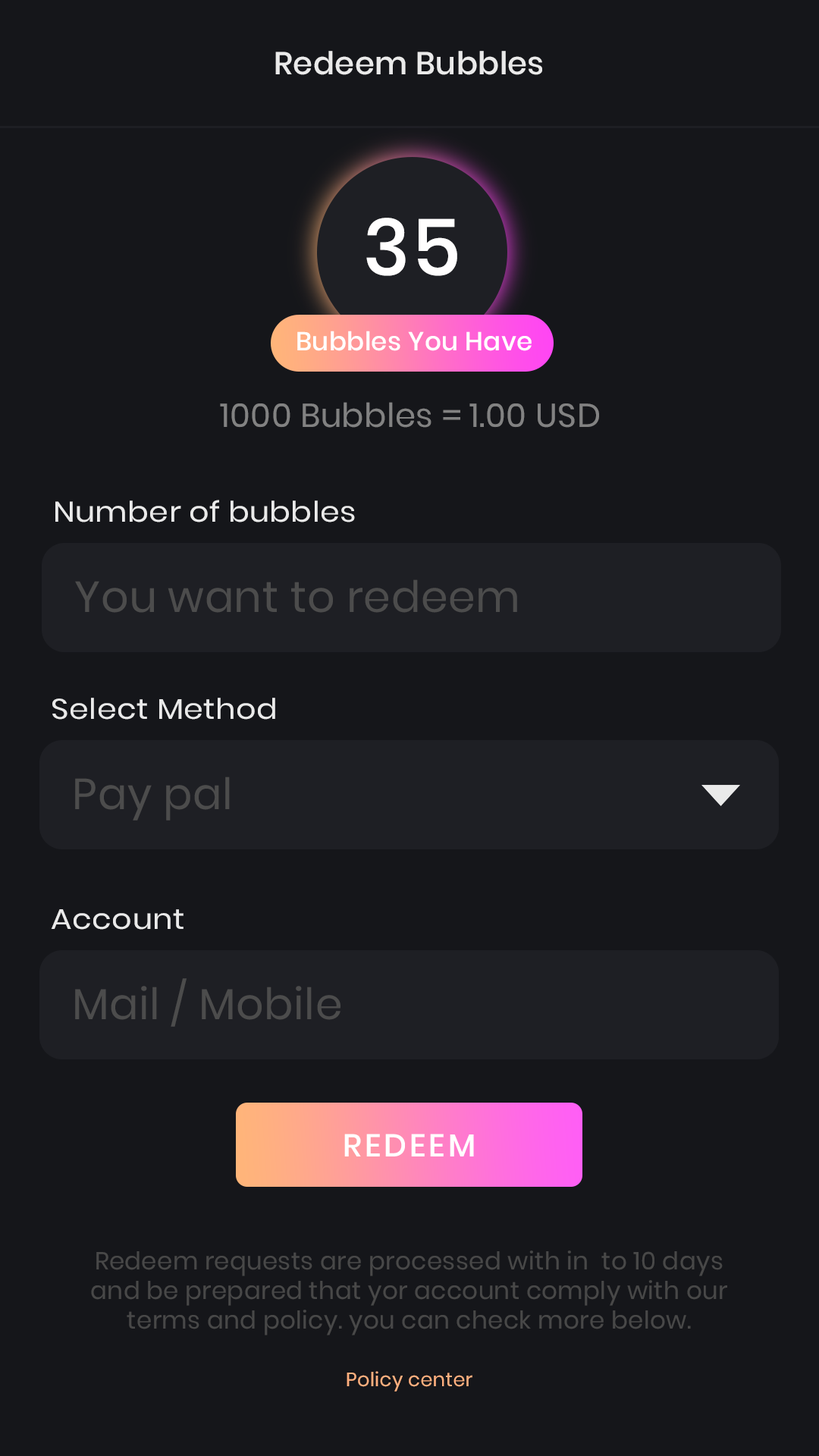
<style>
.page{position:relative;width:819px;height:1456px;background:#15161a}
.page>*{position:absolute;margin:0}
.t1{font:31.6px "Poppins-Medium";letter-spacing:0.01em;color:#eaeaea}
.t2{font:78.5px "Poppins-Medium";letter-spacing:0.01em;color:#fffefe}
.t3{font:25.9px "Poppins-Medium";letter-spacing:0.01em;color:#ffffff}
.t4{font:33px "Poppins-Regular";letter-spacing:0.01em;color:#828282}
.t5{font:28.4px "Poppins-Regular";letter-spacing:0.01em;color:#eaeaea;scale:1.1 1}
.t6{font:43.3px "Poppins-Regular";letter-spacing:0.01em;color:#4c4c4c}
.t7{font:31.6px "Poppins-Medium";letter-spacing:0.1em;color:#ffffff}
.t8{font:24.6px/29.6px "Poppins-Regular";letter-spacing:0.01em;color:#484848}
.t9{font:19.4px "Poppins-Regular";letter-spacing:0.01em;color:#ffb07f}
</style>
<div class="page">
<p class="t1" style="left:275px;top:51px;width:267px;height:24px">Redeem Bubbles</p>
<p class="t2" style="left:366px;top:218px;width:91px;height:58px">35</p>
<p class="t3" style="left:297px;top:331px;width:235px;height:20px">Bubbles You Have</p>
<p class="t4" style="left:220px;top:402px;width:379px;height:26px">1000 Bubbles = 1.00 USD</p>
<p class="t5" style="left:55px;top:500px;width:300px;height:22px">Number of bubbles</p>
<p class="t6" style="left:75px;top:579px;width:442px;height:34px">You want to redeem</p>
<p class="t5" style="left:52px;top:698px;width:223px;height:22px">Select Method</p>
<p class="t6" style="left:75px;top:777px;width:155px;height:44px">Pay pal</p>
<p class="t5" style="left:51px;top:909px;width:133px;height:21px">Account</p>
<p class="t6" style="left:75px;top:978px;width:265px;height:49px">Mail / Mobile</p>
<p class="t7" style="left:344px;top:1134px;width:130px;height:22px">REDEEM</p>
<p class="t8" style="left:91px;top:1250px;width:636px;height:85px;text-align:center">Redeem requests are processed with in  to 10 days<br>and be prepared that yor account comply with our<br>terms and policy. you can check more below.</p>
<p class="t9" style="left:347px;top:1371px;width:125px;height:21px">Policy center</p>
</div>
